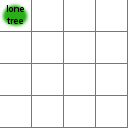
<style>
.page{position:relative;width:128px;height:128px;background:#ffffff}
.page>*{position:absolute;margin:0}
.t1{font:9.9px "MyriadHebrew-Regular";color:#000000}
</style>
<div class="page">
<p class="t1" style="left:6px;top:5px;width:18px;height:19px;text-align:center">lone<br>tree</p>
</div>
